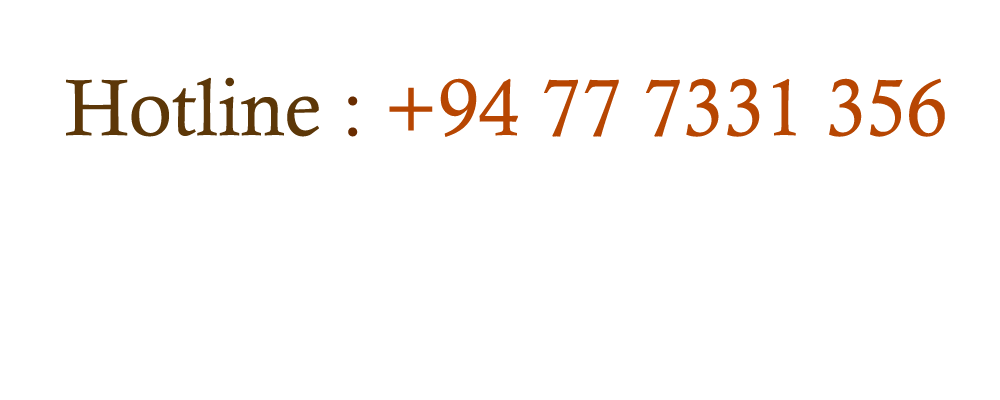
<style>
.page{position:relative;width:1000px;height:400px;background:#ffffff}
.page>*{position:absolute;margin:0}
.t1{font:80px "CalistoMT";color:#b74602}
.t2{font:80px "CalistoMT";color:#5c3708}
.t3{font:80px "CalistoMT";color:#692c00}
</style>
<div class="page">
<p class="t1" style="left:66px;top:77px;width:879px;height:60px"><span class="t2">Hotline</span><span class="t3"> : </span>+94 77 7331 356</p>
</div>
